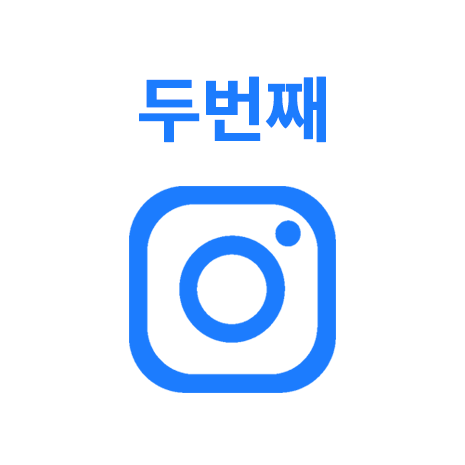
<style>
.page{position:relative;width:465px;height:465px;background:#ffffff}
.page>*{position:absolute;margin:0}
.t1{font:73.2px "Pretendard-Bold";color:#1c7cfe;font-weight:bold}
</style>
<div class="page">
<p class="t1" style="left:139px;top:76px;width:187px;height:67px">두번째</p>
</div>
